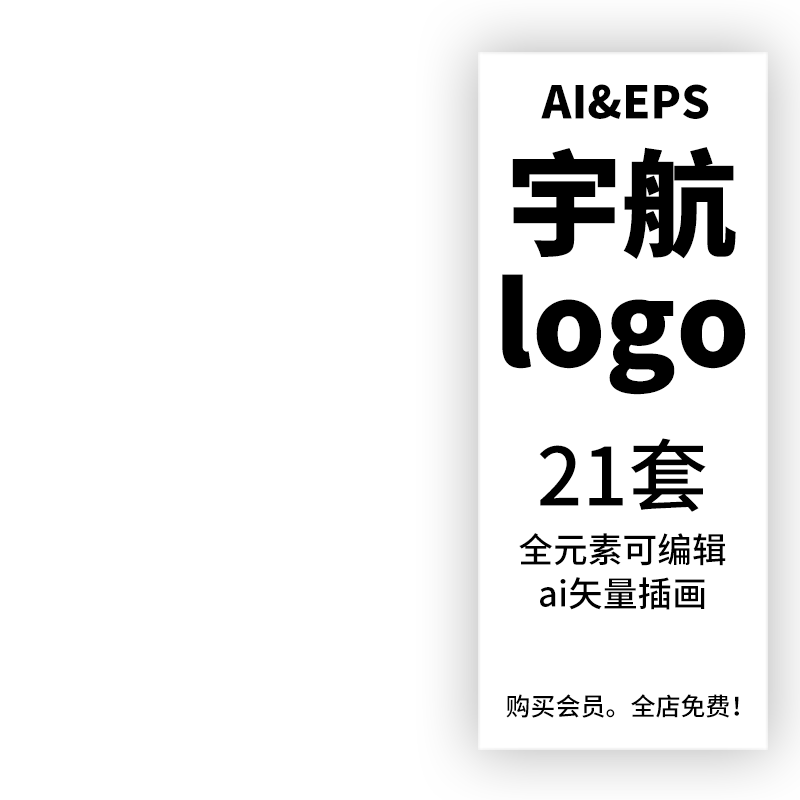
<style>
.page{position:relative;width:800px;height:800px;background:#ffffff}
.page>*{position:absolute;margin:0}
.t1{font:45px "SourceHanSansCN-Heavy";color:#000000;text-transform:uppercase}
.t2{font:115px/120px "SourceHanSansCN-Heavy";color:#000000}
.t3{font:80px "SourceHanSansCN-Medium";color:#000000}
.t4{font:34.7px/44px "SourceHanSansCN-Medium";color:#000000}
.t5{font:25px "SourceHanSansCN-Medium";color:#000000}
</style>
<div class="page">
<p class="t1" style="left:541px;top:84px;width:168px;height:35px">AI&amp;eps</p>
<p class="t2" style="left:502px;top:147px;width:244px;height:248px;text-align:center">宇航<br>logo</p>
<p class="t3" style="left:539px;top:438px;width:167px;height:74px">21套</p>
<p class="t4" style="left:519px;top:533px;width:207px;height:77px;text-align:center">全元素可编辑<br>ai矢量插画</p>
<p class="t5" style="left:506px;top:694px;width:233px;height:24px">购买会员。全店免费！</p>
</div>
